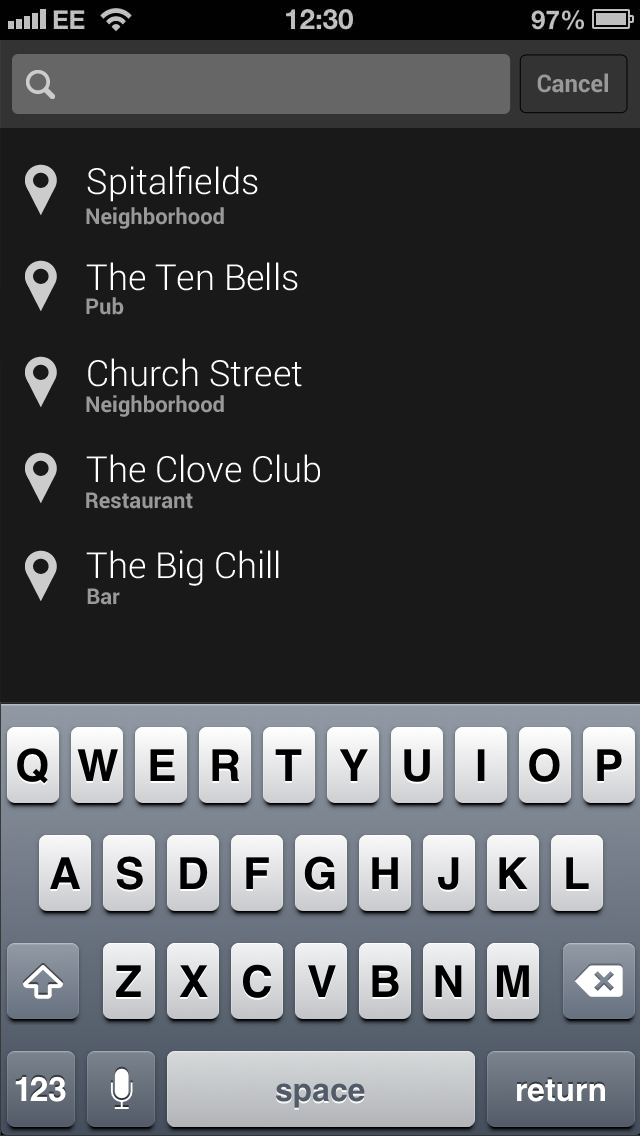
<style>
.page{position:relative;width:640px;height:1136px;background:#191919}
.page>*{position:absolute;margin:0}
.t1{font:24px "Roboto-Bold";color:#999999}
.t2{font:36px "Roboto-Light";color:#ffffff}
.t3{font:22px "Roboto-Bold";color:#999999}
</style>
<div class="page">
<p class="t1" style="left:537px;top:73px;width:71px;height:20px">Cancel</p>
<p class="t2" style="left:87px;top:166px;width:171px;height:36px">Spitalfields</p>
<p class="t3" style="left:86px;top:207px;width:138px;height:22px">Neighborhood</p>
<p class="t2" style="left:86px;top:262px;width:212px;height:29px">The Ten Bells</p>
<p class="t3" style="left:86px;top:297px;width:38px;height:18px">Pub</p>
<p class="t2" style="left:88px;top:358px;width:214px;height:29px">Church Street</p>
<p class="t3" style="left:86px;top:395px;width:138px;height:22px">Neighborhood</p>
<p class="t2" style="left:86px;top:454px;width:234px;height:29px">The Clove Club</p>
<p class="t3" style="left:86px;top:492px;width:107px;height:17px">Restaurant</p>
<p class="t2" style="left:86px;top:550px;width:193px;height:36px">The Big Chill</p>
<p class="t3" style="left:87px;top:588px;width:33px;height:17px">Bar</p>
</div>
